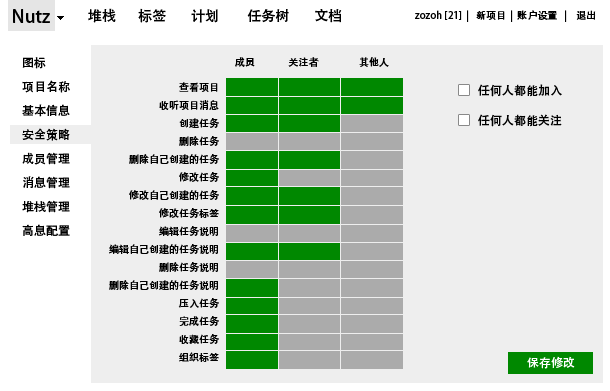
<style>
.page{position:relative;width:610px;height:391px;background:#eeeeee}
.page>*{position:absolute;margin:0}
.t1{font:18px "AdobeHeitiStd-Regular";color:#000000}
.t2{font:14px "AdobeHeitiStd-Regular";color:#000000}
.t3{font:10px "AdobeHeitiStd-Regular";color:#000000}
.t4{font:12px/24px "AdobeHeitiStd-Regular";color:#000000}
.t5{font:10px/18px "AdobeHeitiStd-Regular";color:#000000}
.t6{font:12px/30px "AdobeHeitiStd-Regular";color:#000000}
.t7{font:12px "AdobeHeitiStd-Regular";color:#ffffff}
</style>
<div class="page">
<p class="t1" style="left:13px;top:9px;width:37px;height:14px">Nutz</p>
<p class="t2" style="left:88px;top:8px;width:254px;height:15px">堆栈       标签        计划         任务树        文档</p>
<p class="t3" style="left:415px;top:10px;width:181px;height:12px">zozoh [21]  |   新项目  |  账户设置   |    退出</p>
<p class="t4" style="left:22px;top:57px;width:48px;height:179px">图标<br>项目名称<br>基本信息<br>安全策略<br>成员管理<br>消息管理<br>堆栈管理<br>高息配置</p>
<p class="t3" style="left:235px;top:57px;width:154px;height:10px">成员               关注者                  其他人</p>
<p class="t5" style="left:109px;top:82px;width:110px;height:280px;text-align:right">查看项目<br>收听项目消息<br>创建任务<br>删除任务<br>删除自己创建的任务<br>修改任务<br>修改自己创建的任务<br>修改任务标签<br>编辑任务说明<br>编辑自己创建的任务说明<br>删除任务说明<br>删除自己创建的任务说明<br>压入任务<br>完成任务<br>收藏任务<br>组织标签</p>
<p class="t6" style="left:478px;top:84px;width:84px;height:43px">任何人都能加入<br>任何人都能关注</p>
<p class="t7" style="left:527px;top:356px;width:48px;height:13px">保存修改</p>
</div>
